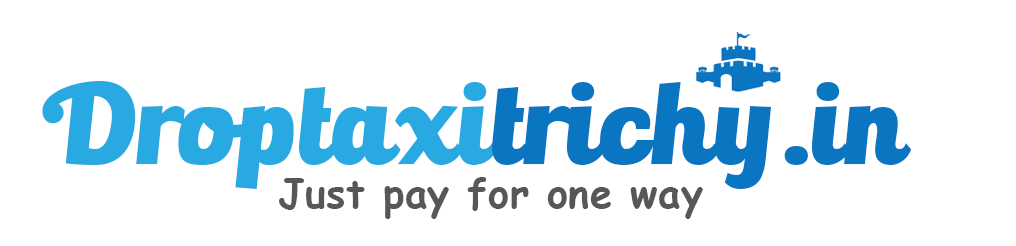
<style>
.page{position:relative;width:1016px;height:246px;background:#ffffff}
.page>*{position:absolute;margin:0}
.t1{font:106.7px "BullettoKilla";letter-spacing:0.01em;color:#0a76c2}
.t2{font:106.7px "BullettoKilla";letter-spacing:0.01em;color:#29a9e1}
.t3{font:40px "ComicSansMS-Bold";letter-spacing:0.01em;color:#575759}
</style>
<div class="page">
<p class="t1" style="left:42px;top:81px;width:870px;height:108px"><span class="t2">Droptaxi</span>trichy.in</p>
<p class="t3" style="left:279px;top:177px;width:424px;height:42px">Just pay for one way</p>
</div>
